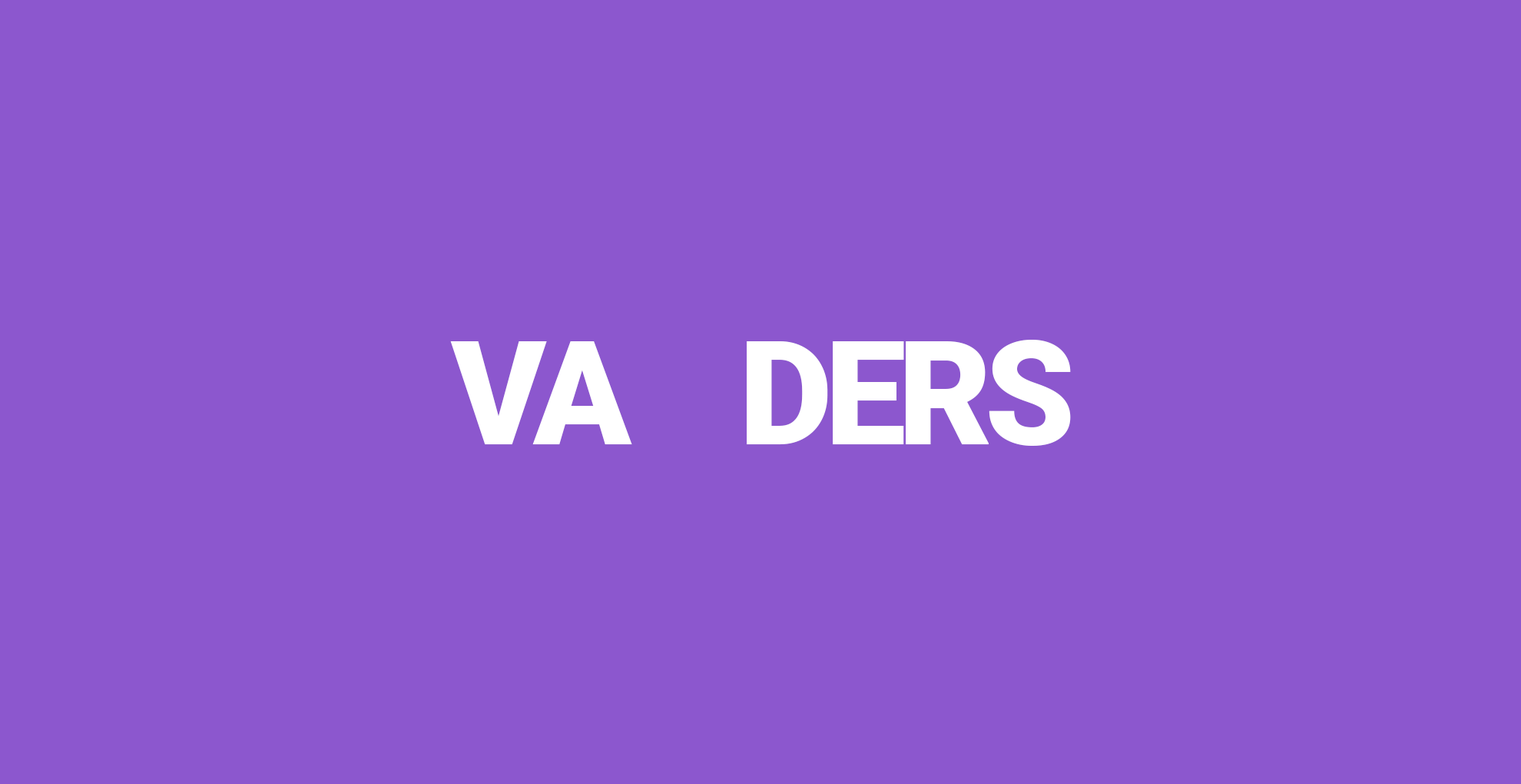
<style>
.page{position:relative;width:1521px;height:784px;background:#8c57ce}
.page>*{position:absolute;margin:0}
.t1{font:144.1px "Roboto-Black";letter-spacing:-0.05em;color:#ffffff}
</style>
<div class="page">
<p class="t1" style="left:450px;top:340px;width:621px;height:106px">VA    DERS</p>
</div>
